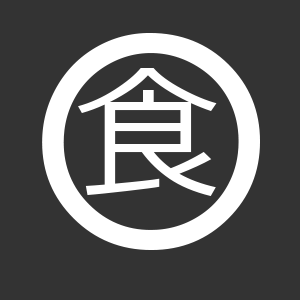
<style>
.page{position:relative;width:300px;height:300px;background:#333333}
.page>*{position:absolute;margin:0}
.t1{font:288px "CenturyGothic";color:#ffffff}
.t2{font:144px "Meiryo";color:#ffffff}
</style>
<div class="page">
<p class="t1" style="left:42px;top:33px;width:218px;height:217px">O</p>
<p class="t2" style="left:78px;top:68px;width:139px;height:128px">食</p>
</div>
